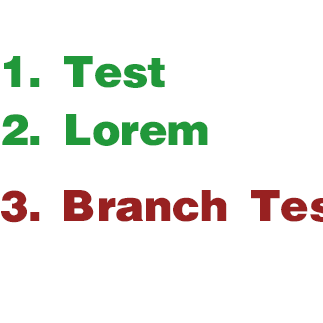
<style>
.page{position:relative;width:323px;height:323px;background:#ffffff}
.page>*{position:absolute;margin:0}
.t1{font:48px "Helvetica-Black-SemiBold";letter-spacing:-0.015em;color:#21983a}
</style>
<div class="page">
<p class="t1" style="left:2px;top:56px;width:206px;height:90px">1. Test<br>2. Lorem</p>
</div>
